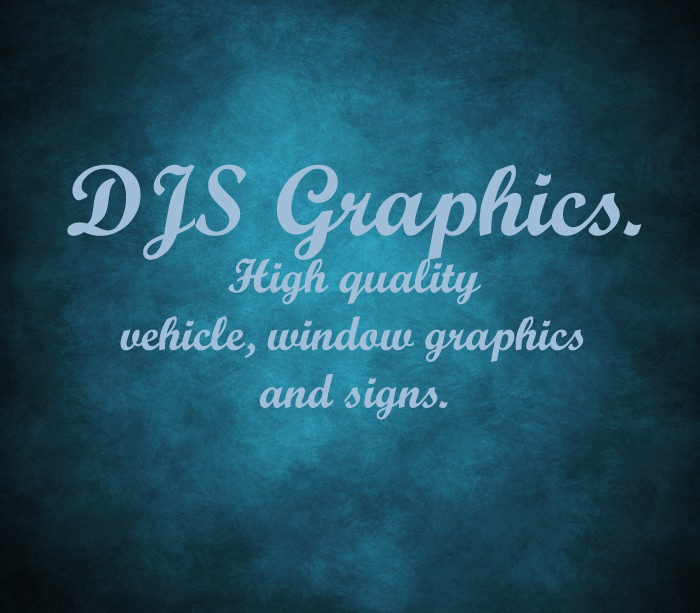
<style>
.page{position:relative;width:700px;height:613px}
.page>*{position:absolute;margin:0}
.t1{font:48px "ScriptMTBold";color:#a1bed9}
.t2{font:100px "ScriptMTBold";color:#a1bed9}
</style>
<div class="page">
<p class="t1" style="left:67px;top:164px;width:575px;height:256px;text-align:center"><span class="t2">DJS Graphics.<br></span>High quality<br>vehicle, window graphics<br>and signs.</p>
</div>
